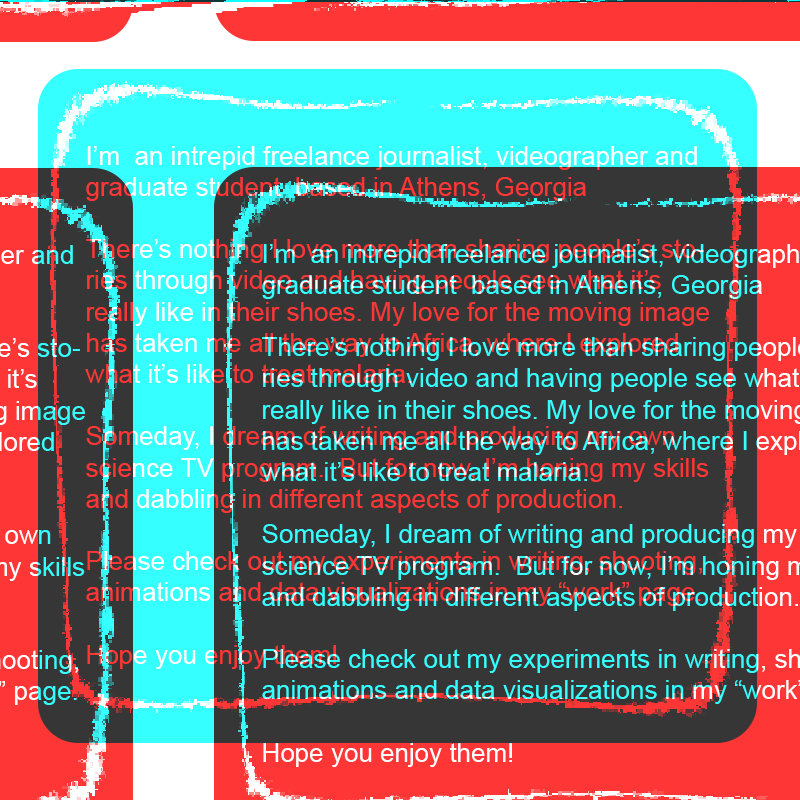
<style>
.page{position:relative;width:800px;height:800px;background:#363636}
.page>*{position:absolute;margin:0}
.t1{font:26px "ArialMT"}
</style>
<div class="page">
<p class="t1" style="left:85px;top:144px;width:624px;height:523px;text-align:right">I’m  an intrepid freelance journalist, videographer and graduate student  based in Athens, Georgia<br><br>There’s nothing I love more than sharing people’s stories through video and having people see what it’s really like in their shoes. My love for the moving image has taken me all the way to Africa, where I explored what it’s like to treat malaria.  <br><br>Someday, I dream of writing and producing my own science TV program.  But for now, I’m honing my skills and dabbling in different aspects of production.<br><br>Please check out my experiments in writing, shooting, animations and data visualizations in my “work” page. <br><br>Hope you enjoy them!</p>
</div>
